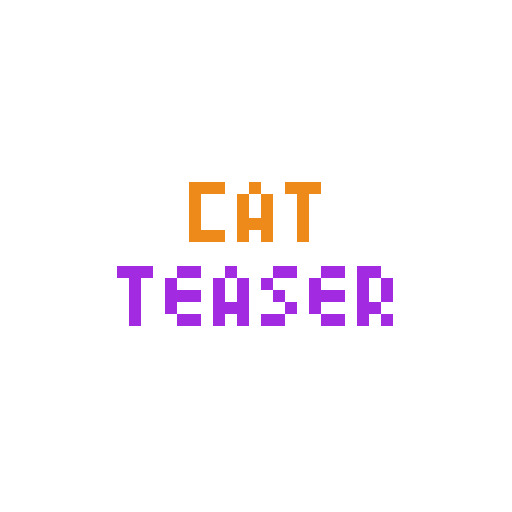
<style>
.page{position:relative;width:512px;height:512px;background:#ffffff}
.page>*{position:absolute;margin:0}
.t1{font:96px "04b24";color:#ed8a19}
.t2{font:96px "04b24";color:#a22be2}
</style>
<div class="page">
<p class="t1" style="left:189px;top:182px;width:132px;height:60px">Cat</p>
<p class="t2" style="left:117px;top:266px;width:276px;height:60px">Teaser</p>
</div>
